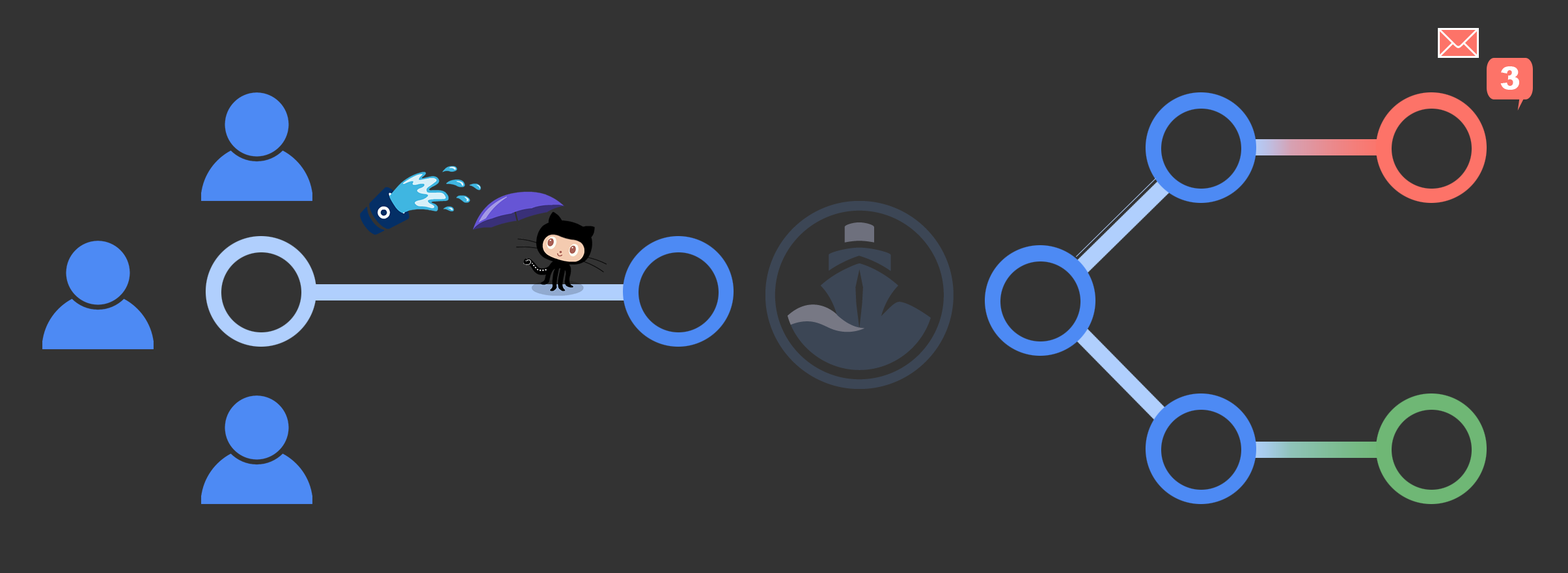
<style>
.page{position:relative;width:1568px;height:573px;background:#333333}
.page>*{position:absolute;margin:0}
.t1{font:31.2px "Arial-Black";color:#ffffff}
</style>
<div class="page">
<p class="t1" style="left:1500px;top:66px;width:19px;height:24px">3</p>
</div>
